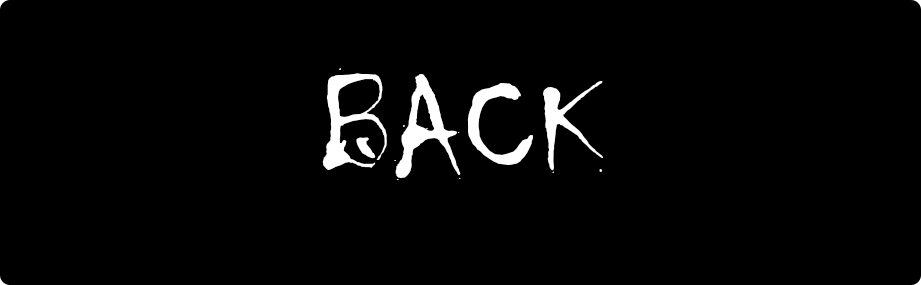
<style>
.page{position:relative;width:921px;height:285px;background:#000000}
.page>*{position:absolute;margin:0}
.t1{font:141.7px "Chiller-Regular";color:#ffffff}
</style>
<div class="page">
<p class="t1" style="left:322px;top:68px;width:282px;height:112px">BACK</p>
</div>
